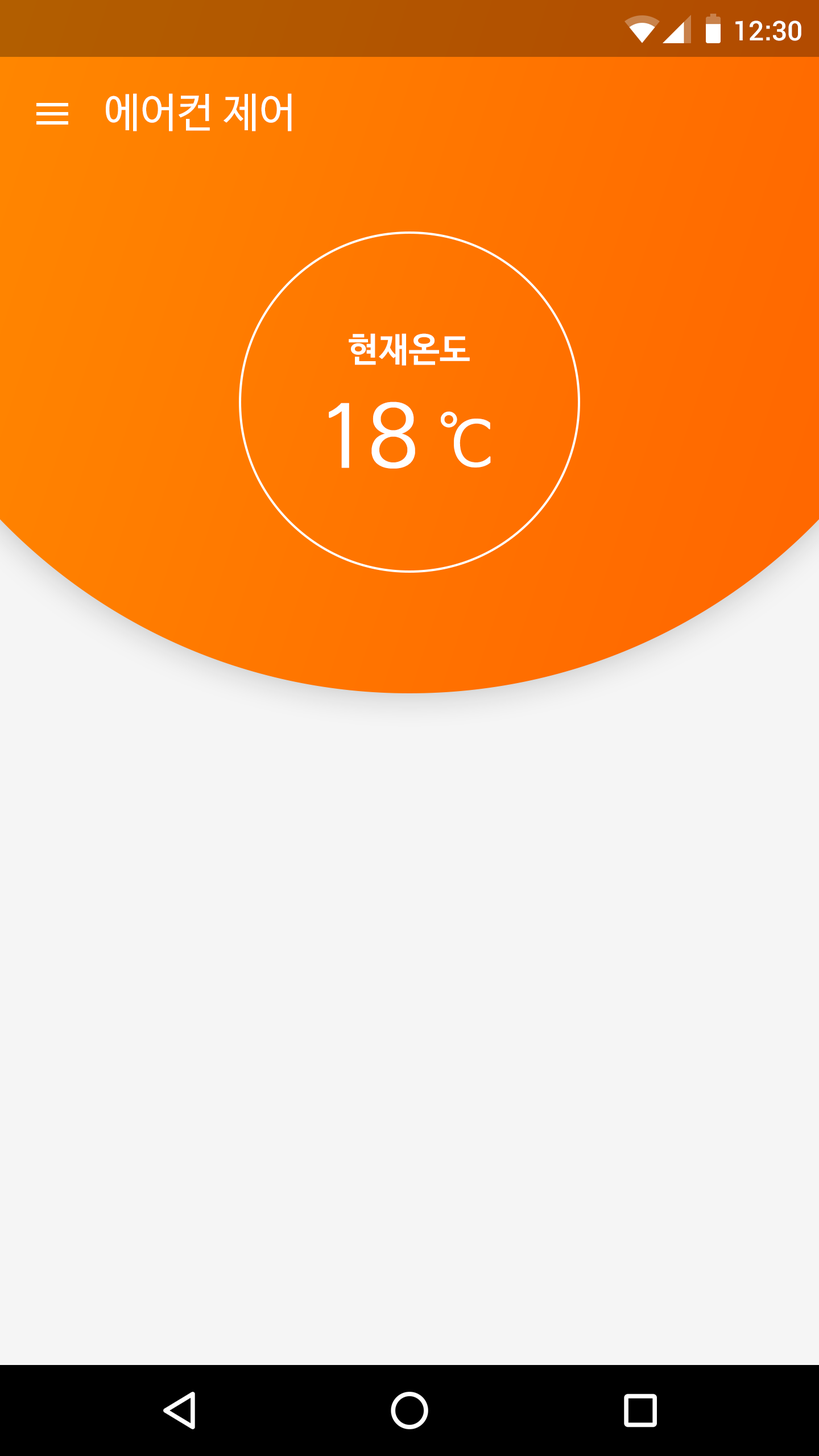
<style>
.page{position:relative;width:819px;height:1456px;background:#f5f5f5}
.page>*{position:absolute;margin:0}
.t1{font:27.3px "Roboto-Medium";color:#ffffff}
.t2{font:40.9px "NanumBarunGothic";color:#ffffff}
.t3{font:34.1px "NanumBarunGothicBold";color:#ffffff}
.t4{font:85.3px "NanumBarunGothic";color:#ffffff}
.t5{font:68.2px "NanumBarunGothic";color:#ffffff}
</style>
<div class="page">
<p class="t1" style="left:735px;top:20px;width:66px;height:21px">12:30</p>
<p class="t2" style="left:106px;top:93px;width:186px;height:38px">에어컨 제어</p>
<p class="t3" style="left:349px;top:333px;width:121px;height:33px">현재온도</p>
<p class="t4" style="left:329px;top:402px;width:162px;height:67px">18 <span class="t5">℃</span></p>
</div>
